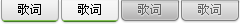
<style>
.page{position:relative;width:240px;height:25px}
.page>*{position:absolute;margin:0}
.t1{font:12px "SimSun";color:#000000}
.t2{font:12px "SimSun";color:#666666}
</style>
<div class="page">
<p class="t1" style="left:18px;top:4px;width:23px;height:11px">歌词</p>
<p class="t1" style="left:78px;top:4px;width:23px;height:11px">歌词</p>
<p class="t2" style="left:138px;top:4px;width:23px;height:11px">歌词</p>
<p class="t2" style="left:198px;top:4px;width:23px;height:11px">歌词</p>
</div>
